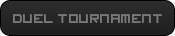
<style>
.page{position:relative;width:175px;height:36px}
.page>*{position:absolute;margin:0}
.t1{font:14px "imagine-font";color:#797878}
</style>
<div class="page">
<p class="t1" style="left:13px;top:14px;width:149px;height:9px">duel tournament</p>
</div>
